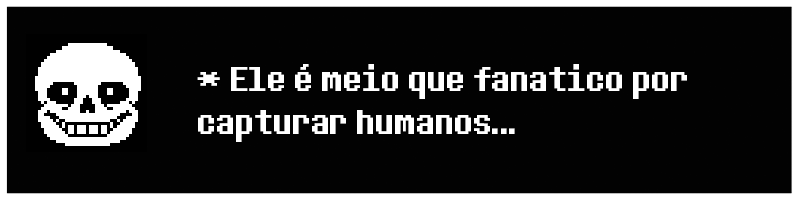
<style>
.page{position:relative;width:800px;height:200px;background:#020202}
.page>*{position:absolute;margin:0}
.t1{font:36px "DeterminationSans";color:#ffffff}
</style>
<div class="page">
<p class="t1" style="left:197px;top:64px;width:490px;height:78px">* Ele é meio que fanatico por capturar humanos...</p>
</div>
